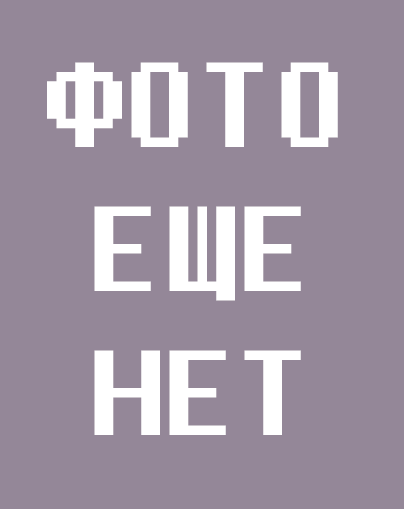
<style>
.page{position:relative;width:404px;height:509px;background:#948798}
.page>*{position:absolute;margin:0}
.t1{font:120px "Fixedsys";color:#ffffff}
</style>
<div class="page">
<p class="t1" style="left:47px;top:62px;width:291px;height:373px;text-align:center">ФОТО<br>ЕЩЕ<br>НЕТ</p>
</div>
